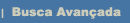
<style>
.page{position:relative;width:130px;height:23px;background:#4775a3}
.page>*{position:absolute;margin:0}
.t1{font:12px "Arial-Black";color:#cdccba}
.t2{font:10px "Arial-Black";color:#cdccba}
</style>
<div class="page">
<p class="t1" style="left:1px;top:7px;width:120px;height:12px"><span class="t2">|</span>  Busca Avançada</p>
</div>
